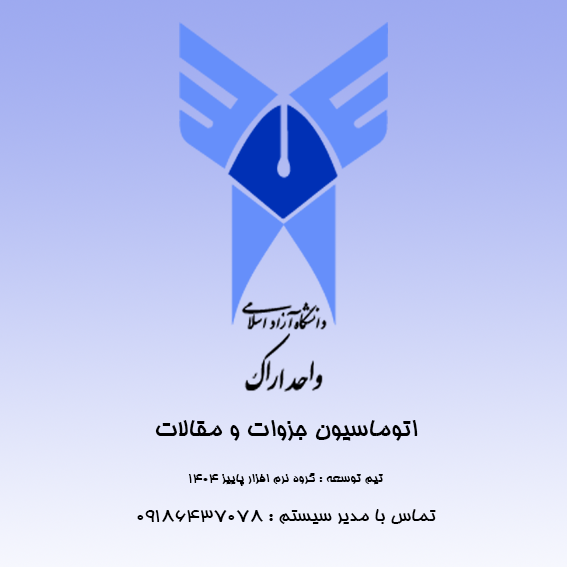
<style>
.page{position:relative;width:567px;height:567px}
.page>*{position:absolute;margin:0}
.t1{font:13.3px "BHoma";color:#010101;scale:1.1 1}
.t2{font:25.1px "BHoma";color:#000000;scale:1.1 1}
.t3{font:18.7px "BHoma";color:#000000;scale:1.1 1}
</style>
<div class="page">
<p class="t1" style="left:137px;top:420px;width:299px;height:105px;text-align:center"><span class="t2">اتوماسیون جزوات و مقالات<br><br></span>تیم توسعه : گروه نرم افزار پاییز 1404<br><br><span class="t3">تماس با مدیر سیستم : 09186437078</span></p>
</div>
